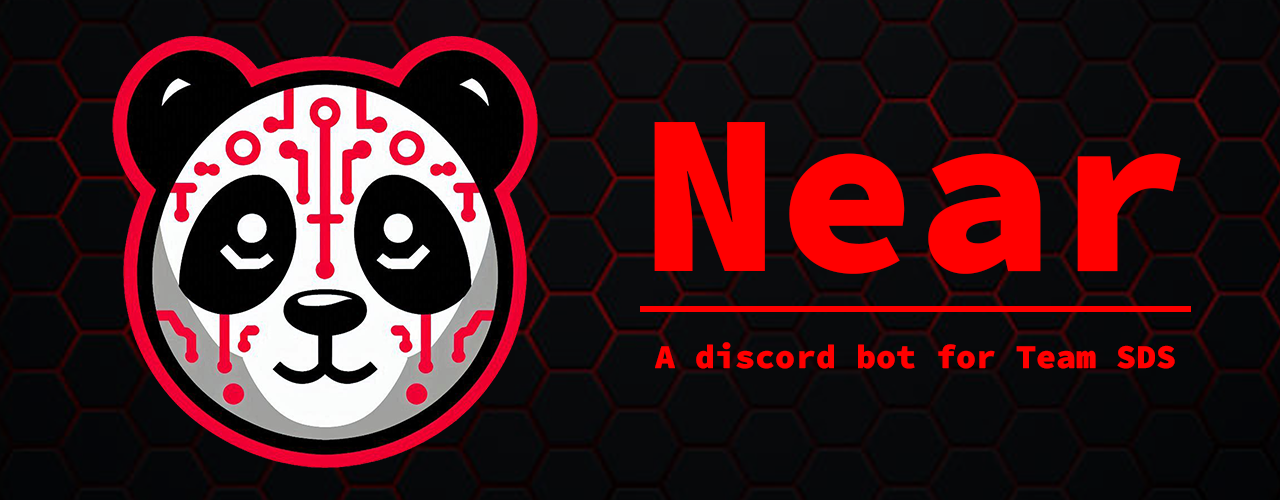
<style>
.page{position:relative;width:1280px;height:500px}
.page>*{position:absolute;margin:0}
.t1{font:229.1px "SourceCodePro-Black";color:#ff0000}
.t2{font:33.3px "SourceCodePro-Black";color:#ff0000}
</style>
<div class="page">
<p class="t1" style="left:654px;top:122px;width:527px;height:152px">Near</p>
<p class="t2" style="left:655px;top:342px;width:520px;height:27px">A discord bot for Team SDS</p>
</div>
